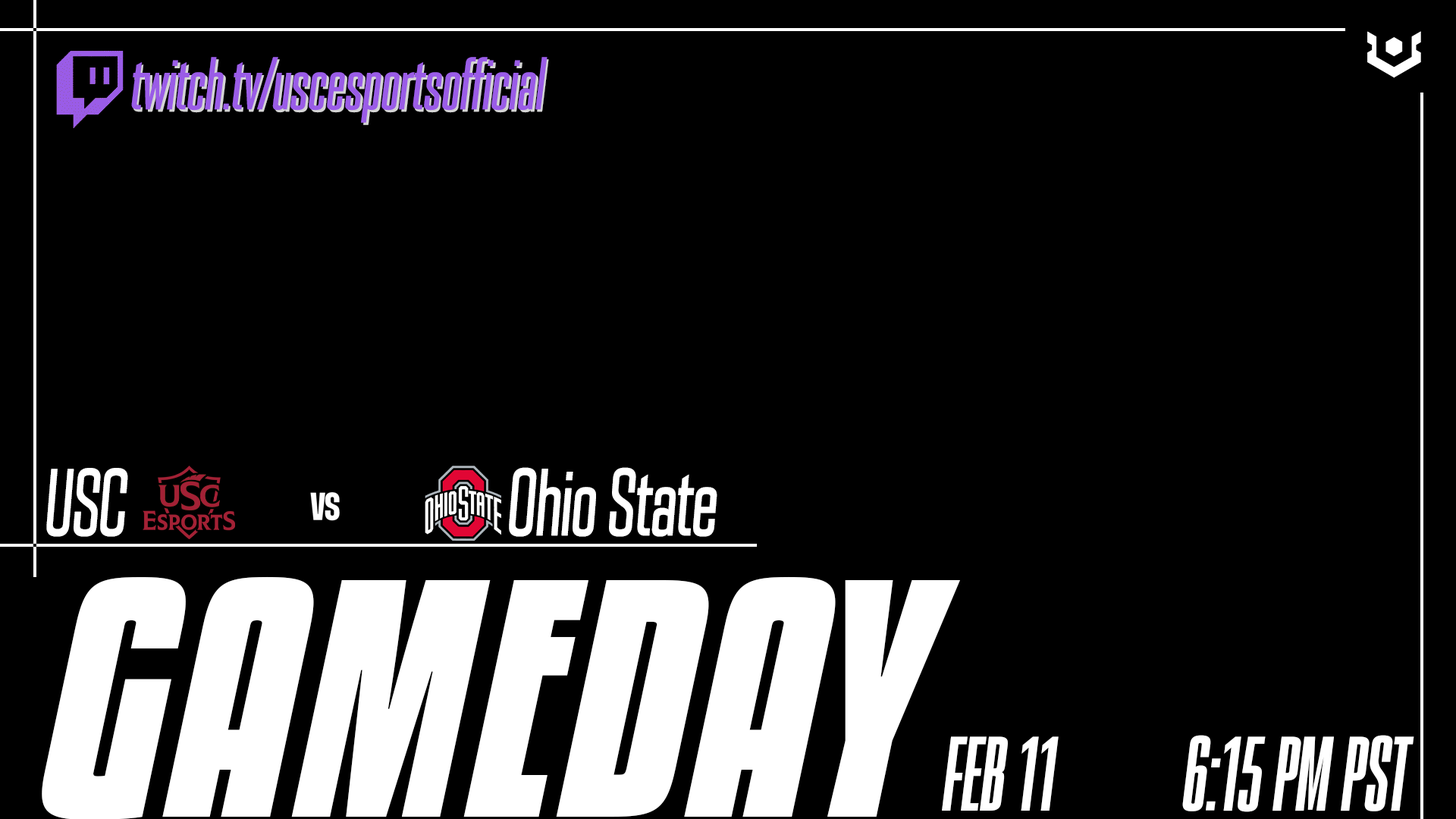
<style>
.page{position:relative;width:1456px;height:819px;background:#000000}
.page>*{position:absolute;margin:0}
.t1{font:66.7px "PODIUMSharpItalic_400.000wght_55.000wdth";color:#9a5ce7}
.t2{font:66.7px "PODIUMSharpItalic_400.000wght_55.000wdth"}
.t3{font:85px "PODIUMSharpItalic_500.000wght_73.000wdth";color:#ffffff;scale:0.67 1}
.t4{font:85.3px "PODIUMSharpItalic_500.000wght_73.000wdth";color:#ffffff;scale:0.67 1}
.t5{font:299.9px "KenyanCoffee-BoldItalic";color:#ffffff}
.t6{font:94.8px "PODIUMSharpItalic_500.000wght";color:#ffffff}
</style>
<div class="page">
<p class="t1" style="left:131px;top:57px;width:417px;height:66px">twitch.tv/uscesportsofficial</p>
<p class="t2" style="left:133px;top:59px;width:416px;height:66px">twitch.tv/uscesportsofficial</p>
<p class="t3" style="left:46px;top:468px;width:82px;height:69px">USC</p>
<p class="t4" style="left:509px;top:467px;width:208px;height:70px">Ohio State</p>
<p class="t5" style="left:42px;top:576px;width:918px;height:244px">GAMEDAY</p>
<p class="t6" style="left:942px;top:736px;width:117px;height:75px">FEB 11</p>
<p class="t6" style="left:1182px;top:735px;width:232px;height:77px">6:15 PM PST</p>
</div>
